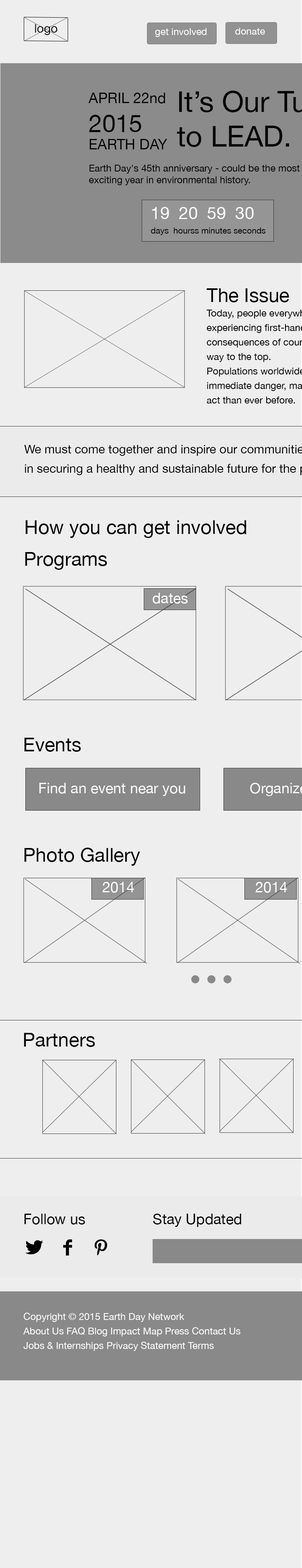
<style>
.page{position:relative;width:302px;height:1568px;background:#eeeeee}
.page>*{position:absolute;margin:0}
.t1{font:12.1px "HelveticaNeue";color:#050505}
.t2{font:9.7px "HelveticaNeue";color:#fafefe}
.t3{font:14.5px "HelveticaNeue";color:#050505}
.t4{font:24.2px "HelveticaNeue";color:#050505}
.t5{font:9.7px "HelveticaNeue";color:#050505}
.t6{font:16.9px "HelveticaNeue";color:#fbf9f9}
.t7{font:8.5px "HelveticaNeue";color:#050505}
.t8{font:19.3px "HelveticaNeue";color:#020202}
.t9{font:14.5px "HelveticaNeue";color:#fefbfb}
.t10{font:14.5px "HelveticaNeue";color:#fbfafa}
.t11{font:14.5px "HelveticaNeue";color:#fefefe}
.t12{font:14.5px "HelveticaNeue";color:#020202}
.t13{font:9.7px/14.5px "HelveticaNeue";color:#fefbfb}
.t14{font:9.7px/19.3px "HelveticaNeue";color:#fefbfb}
</style>
<div class="page">
<p class="t1" style="left:35px;top:24px;width:23px;height:11px">logo</p>
<p class="t2" style="left:155px;top:28px;width:52px;height:9px">get involved</p>
<p class="t2" style="left:235px;top:28px;width:30px;height:7px">donate</p>
<p class="t3" style="left:88px;top:93px;width:80px;height:56px">APRIL 22nd<br><span class="t4">2015<br></span>EARTH DAY</p>
<p class="t5" style="left:89px;top:165px;width:211px;height:20px">Earth Day's 45th anniversary - could be the most exciting year in environmental history.</p>
<p class="t6" style="left:152px;top:207px;width:102px;height:12px">19  20  59  30</p>
<p class="t7" style="left:151px;top:228px;width:115px;height:7px">days  hourss minutes seconds</p>
<p class="t8" style="left:25px;top:520px;width:221px;height:18px">How you can get involved</p>
<p class="t8" style="left:25px;top:552px;width:82px;height:18px">Programs</p>
<p class="t9" style="left:153px;top:593px;width:35px;height:11px">dates</p>
<p class="t8" style="left:24px;top:738px;width:57px;height:14px">Events</p>
<p class="t10" style="left:39px;top:783px;width:146px;height:13px">Find an event near you</p>
<p class="t8" style="left:24px;top:848px;width:116px;height:18px">Photo Gallery</p>
<p class="t11" style="left:102px;top:882px;width:32px;height:11px">2014</p>
<p class="t11" style="left:255px;top:882px;width:32px;height:11px">2014</p>
<p class="t8" style="left:24px;top:1033px;width:71px;height:14px">Partners</p>
<p class="t12" style="left:24px;top:1214px;width:61px;height:11px">Follow us</p>
<p class="t12" style="left:153px;top:1214px;width:88px;height:13px">Stay Updated</p>
<p class="t13" style="left:23px;top:1313px;width:217px;height:38px"><span class="t14">Copyright © 2015 Earth Day Network<br></span>About Us FAQ Blog Impact Map Press Contact Us <br>Jobs &amp; Internships Privacy Statement Terms</p>
</div>
